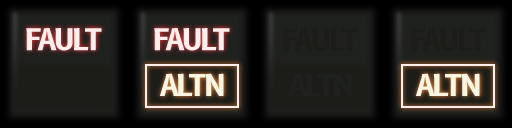
<style>
.page{position:relative;width:512px;height:128px}
.page>*{position:absolute;margin:0}
.t1{font:29.2px "B612-Bold";letter-spacing:-0.075em;color:#ffeeee}
.t2{font:29.2px "B612-Bold";letter-spacing:-0.075em;color:#1c1d19}
.t3{font:29.2px "B612-Bold";letter-spacing:-0.075em;color:#f8f5e2}
.t4{font:29.2px "B612-Bold";letter-spacing:-0.075em;color:#1f211e}
</style>
<div class="page">
<p class="t1" style="left:155px;top:28px;width:76px;height:23px">FAULT</p>
<p class="t2" style="left:283px;top:28px;width:76px;height:23px">FAULT</p>
<p class="t2" style="left:411px;top:28px;width:76px;height:23px">FAULT</p>
<p class="t3" style="left:160px;top:74px;width:64px;height:23px">ALTN</p>
<p class="t4" style="left:288px;top:74px;width:64px;height:23px">ALTN</p>
<p class="t3" style="left:416px;top:74px;width:64px;height:23px">ALTN</p>
</div>
